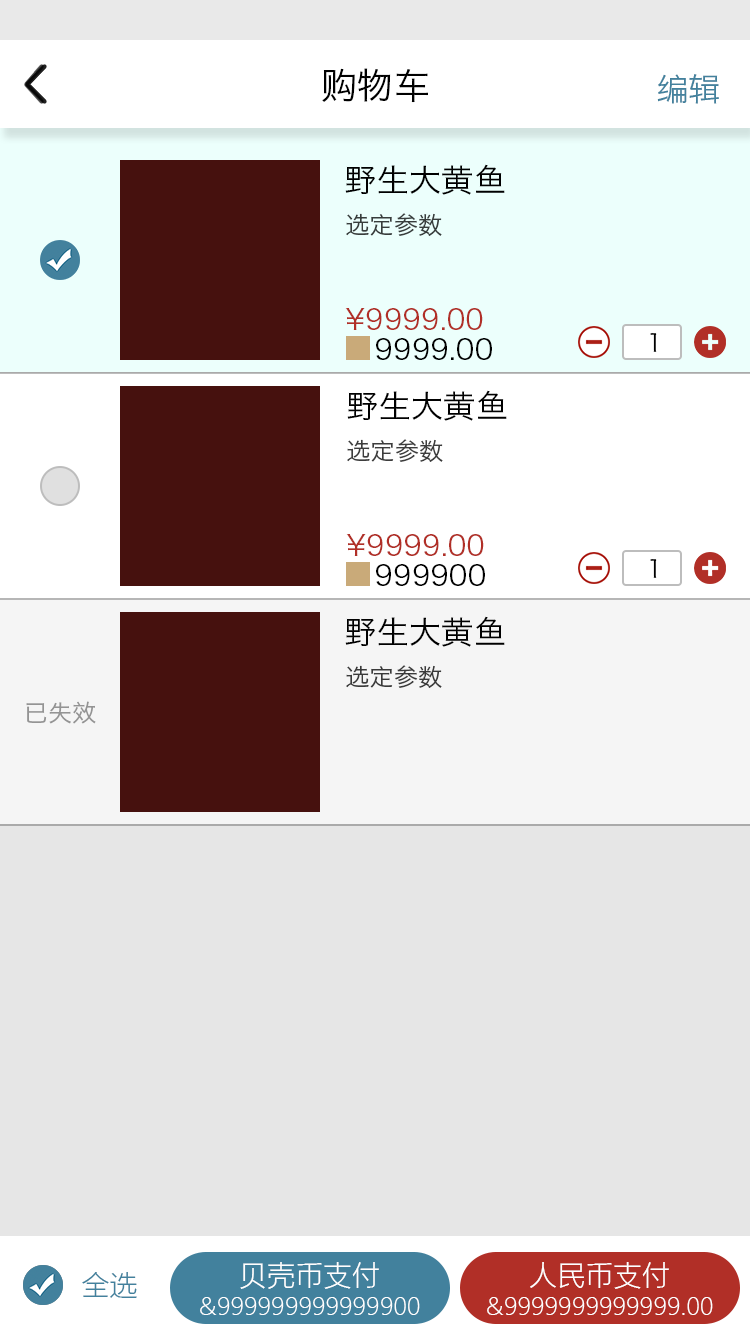
<style>
.page{position:relative;width:750px;height:1334px;background:#e6e6e6}
.page>*{position:absolute;margin:0}
.t1{font:36px "HiraginoSansGB-W3";color:#000000}
.t2{font:32px "HiraginoSansGB-W3";color:#42819d}
.t3{font:32px "HiraginoSansGB-W3";color:#000000}
.t4{font:24px "HiraginoSansGB-W3";color:#383d3c}
.t5{font:28px "HiraginoSansGB-W3";color:#b12f27}
.t6{font:28px "HiraginoSansGB-W3";color:#000000}
.t7{font:24px "HiraginoSansGB-W3";color:#000000}
.t8{font:24px "HiraginoSansGB-W3";color:#3d3d3d}
.t9{font:24px "HiraginoSansGB-W3";color:#3a3a3a}
.t10{font:24px "HiraginoSansGB-W3";color:#949494}
.t11{font:28px "MicrosoftYaHeiLight";color:#ffffff}
.t12{font:28px "MicrosoftYaHeiLight";color:#42819d}
.t13{font:24px "MicrosoftYaHeiLight";color:#ffffff}
</style>
<div class="page">
<p class="t1" style="left:322px;top:68px;width:106px;height:35px">购物车</p>
<p class="t2" style="left:657px;top:74px;width:62px;height:30px">编辑</p>
<p class="t3" style="left:345px;top:164px;width:160px;height:31px">野生大黄鱼</p>
<p class="t4" style="left:346px;top:213px;width:96px;height:23px">选定参数</p>
<p class="t5" style="left:345px;top:308px;width:138px;height:22px">¥9999.00</p>
<p class="t6" style="left:376px;top:338px;width:116px;height:22px">9999.00</p>
<p class="t7" style="left:650px;top:333px;width:7px;height:19px">1</p>
<p class="t3" style="left:347px;top:390px;width:160px;height:31px">野生大黄鱼</p>
<p class="t8" style="left:347px;top:439px;width:96px;height:23px">选定参数</p>
<p class="t5" style="left:346px;top:534px;width:138px;height:22px">¥9999.00</p>
<p class="t6" style="left:376px;top:564px;width:109px;height:22px">999900</p>
<p class="t7" style="left:650px;top:559px;width:7px;height:19px">1</p>
<p class="t3" style="left:345px;top:616px;width:160px;height:31px">野生大黄鱼</p>
<p class="t9" style="left:346px;top:665px;width:96px;height:23px">选定参数</p>
<p class="t10" style="left:26px;top:701px;width:70px;height:23px">已失效</p>
<p class="t11" style="left:240px;top:1262px;width:139px;height:27px">贝壳币支付</p>
<p class="t11" style="left:530px;top:1262px;width:139px;height:27px">人民币支付</p>
<p class="t12" style="left:82px;top:1272px;width:55px;height:26px">全选</p>
<p class="t13" style="left:200px;top:1297px;width:220px;height:18px">&amp;999999999999900</p>
<p class="t13" style="left:487px;top:1297px;width:226px;height:18px">&amp;9999999999999.00</p>
</div>
